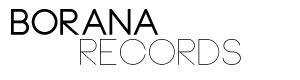
<style>
.page{position:relative;width:300px;height:80px;background:#ffffff}
.page>*{position:absolute;margin:0}
.t1{font:36px "Neou-Bold";color:#000000}
.t2{font:36px "Neou-Thin"}
</style>
<div class="page">
<p class="t1" style="left:11px;top:9px;width:148px;height:26px">BORANA</p>
<p class="t2" style="left:80px;top:39px;width:161px;height:26px">records</p>
</div>
